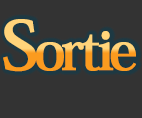
<style>
.page{position:relative;width:142px;height:118px;background:#333333}
.page>*{position:absolute;margin:0}
.t1{font:56px "HeiseiMinStd-W7";letter-spacing:-0.08em;font-weight:bold}
.t2{font:70px "HeiseiMinStd-W7";letter-spacing:-0.08em;font-weight:bold}
</style>
<div class="page">
<p class="t1" style="left:3px;top:19px;width:133px;height:53px"><span class="t2">S</span>ortie</p>
</div>
